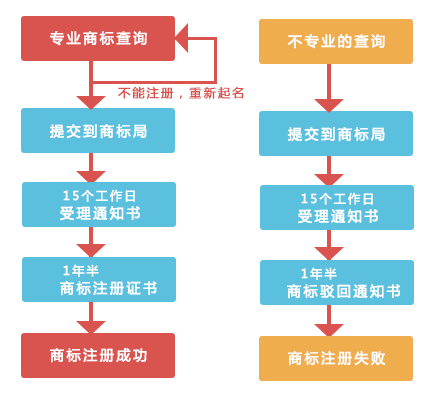
<style>
.page{position:relative;width:424px;height:393px;background:#ffffff}
.page>*{position:absolute;margin:0}
.t1{font:14px "MicrosoftYaHei";letter-spacing:0.16em;color:#ffffff;font-weight:bold}
.t2{font:12px "MicrosoftYaHei";letter-spacing:0.16em;color:#d9534f;font-weight:bold}
.t3{font:12px "MicrosoftYaHei";letter-spacing:0.16em;color:#ffffff;font-weight:bold}
</style>
<div class="page">
<p class="t1" style="left:50px;top:31px;width:97px;height:15px">专业商标查询</p>
<p class="t1" style="left:287px;top:34px;width:98px;height:15px">不专业的查询</p>
<p class="t2" style="left:118px;top:86px;width:126px;height:13px">不能注册，重新起名</p>
<p class="t1" style="left:49px;top:124px;width:98px;height:15px">提交到商标局</p>
<p class="t1" style="left:287px;top:127px;width:98px;height:15px">提交到商标局</p>
<p class="t3" style="left:63px;top:189px;width:72px;height:13px">15个工作日</p>
<p class="t3" style="left:301px;top:192px;width:72px;height:13px">15个工作日</p>
<p class="t1" style="left:60px;top:206px;width:80px;height:15px">受理通知书</p>
<p class="t1" style="left:298px;top:209px;width:80px;height:15px">受理通知书</p>
<p class="t3" style="left:63px;top:264px;width:36px;height:13px">1年半</p>
<p class="t3" style="left:301px;top:267px;width:36px;height:13px">1年半</p>
<p class="t1" style="left:60px;top:281px;width:97px;height:15px">商标注册证书</p>
<p class="t1" style="left:287px;top:284px;width:113px;height:15px">商标驳回通知书</p>
<p class="t1" style="left:50px;top:348px;width:97px;height:15px">商标注册成功</p>
<p class="t1" style="left:288px;top:351px;width:98px;height:15px">商标注册失败</p>
</div>
